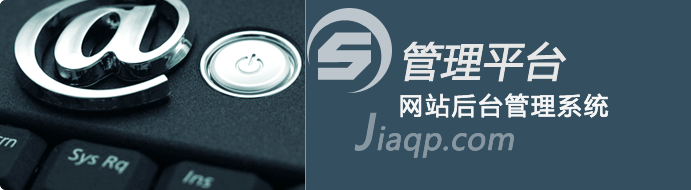
<style>
.page{position:relative;width:691px;height:190px;background:#334f60}
.page>*{position:absolute;margin:0}
.t1{font:40px "MicrosoftYaHei";color:#e7e7e7;font-weight:bold;font-style:italic}
.t2{font:24px "MicrosoftYaHei";letter-spacing:0.075em;color:#f6f6f6;font-weight:bold}
.t3{font:48px "MicrosoftYaHei";color:#8797a1;font-weight:bold;font-style:italic}
.t4{font:30px "MicrosoftYaHei";color:#8797a1;font-weight:bold;font-style:italic}
</style>
<div class="page">
<p class="t1" style="left:403px;top:41px;width:164px;height:41px">管理平台</p>
<p class="t2" style="left:400px;top:93px;width:209px;height:25px">网站后台管理系统</p>
<p class="t3" style="left:354px;top:112px;width:23px;height:39px">J</p>
<p class="t4" style="left:377px;top:126px;width:137px;height:32px">iaqp.com</p>
</div>
